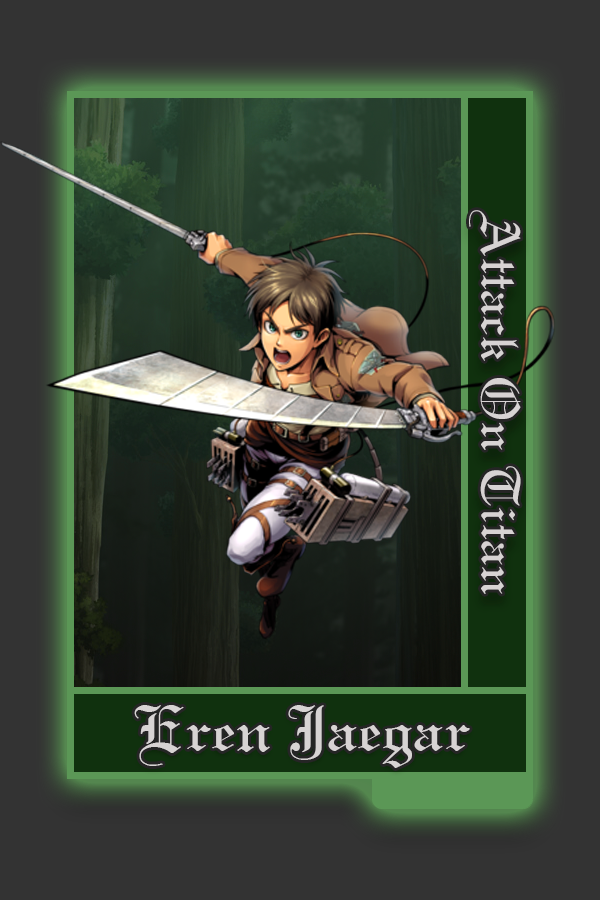
<style>
.page{position:relative;width:600px;height:900px;background:#333333}
.page>*{position:absolute;margin:0}
.t1{font:58.3px "Linotext";color:#d7d4d4}
.t2{font:70.1px "Linotext";color:#d7d4d4}
</style>
<div class="page">
<p class="t1" style="left:469px;top:210px;width:52px;height:384px;rotate:90deg">Attack On Titan</p>
<p class="t2" style="left:134px;top:705px;width:336px;height:63px">Eren Jaegar</p>
</div>
